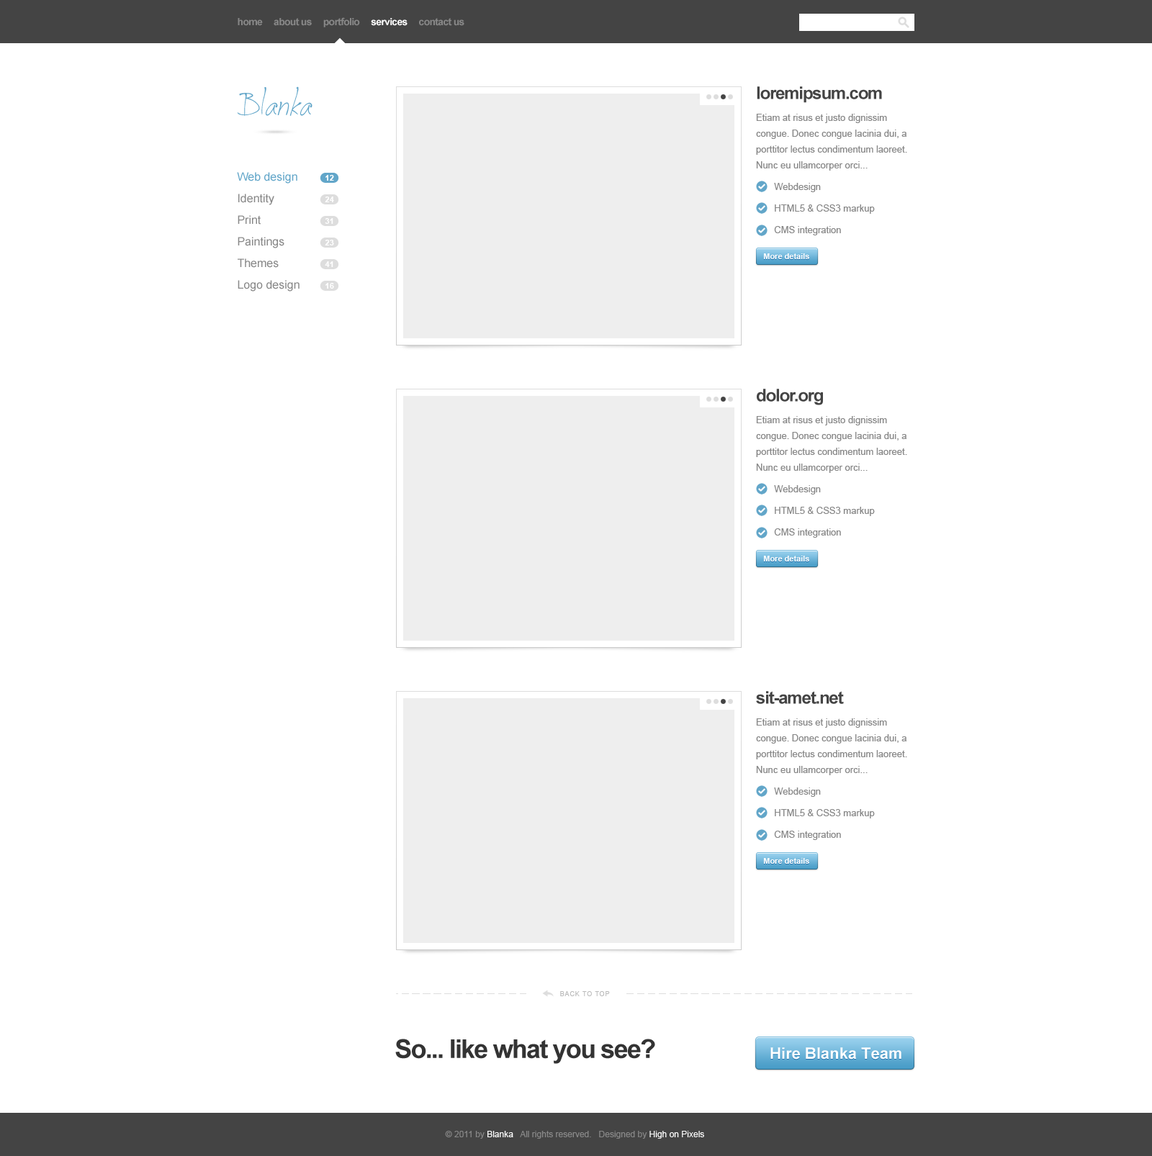
<style>
.page{position:relative;width:1152px;height:1156px;background:#ffffff}
.page>*{position:absolute;margin:0}
.t1{font:10.1px "Arial-BoldMT";letter-spacing:-0.05em;color:#888888}
.t2{font:10.1px "Arial-BoldMT";letter-spacing:-0.05em;color:#ffffff}
.t3{font:43.9px "JellykaCuttyCupcakes";color:#62a6c9}
.t4{font:17.3px "Arial-BoldMT";letter-spacing:-0.05em;color:#444444}
.t5{font:9.4px/15.8px "ArialMT";color:#888888}
.t6{font:9.4px/21.6px "ArialMT";color:#888888}
.t7{font:11.5px/21.6px "ArialMT";color:#888888}
.t8{font:11.5px/21.6px "ArialMT";color:#62a6c9}
.t9{font:7.9px "Arial-BoldMT";color:#ffffff}
.t10{font:6.5px "ArialMT";letter-spacing:0.1em;color:#bbbbbb;text-transform:uppercase}
.t11{font:25.9px "Arial-BoldMT";letter-spacing:-0.05em;color:#333333}
.t12{font:15.8px "Arial-BoldMT";color:#ffffff}
.t13{font:8.6px "ArialMT";color:#888888}
.t14{font:8.6px "ArialMT";color:#ffffff}
</style>
<div class="page">
<p class="t1" style="left:238px;top:17px;width:226px;height:10px">home     about us     portfolio     <span class="t2">services</span>     contact us</p>
<p class="t3" style="left:237px;top:86px;width:75px;height:31px">Blanka</p>
<p class="t4" style="left:757px;top:86px;width:125px;height:17px">loremipsum.com</p>
<p class="t5" style="left:756px;top:114px;width:151px;height:121px">Etiam at risus et justo dignissim congue. Donec congue lacinia dui, a porttitor lectus condimentum laoreet. Nunc eu ullamcorper orci...<br><span class="t6">       Webdesign<br>       HTML5 &amp; CSS3 markup<br>       CMS integration</span></p>
<p class="t7" style="left:237px;top:172px;width:63px;height:120px"><span class="t8">Web design<br></span>Identity<br>Print<br>Paintings<br>Themes<br>Logo design</p>
<p class="t9" style="left:325px;top:175px;width:9px;height:6px">12</p>
<p class="t9" style="left:325px;top:197px;width:9px;height:5px">24</p>
<p class="t9" style="left:325px;top:218px;width:8px;height:6px">31</p>
<p class="t9" style="left:325px;top:240px;width:9px;height:6px">23</p>
<p class="t9" style="left:763px;top:253px;width:46px;height:6px">More details</p>
<p class="t9" style="left:325px;top:261px;width:8px;height:6px">41</p>
<p class="t9" style="left:325px;top:283px;width:9px;height:6px">16</p>
<p class="t4" style="left:757px;top:389px;width:66px;height:16px">dolor.org</p>
<p class="t5" style="left:756px;top:416px;width:151px;height:122px">Etiam at risus et justo dignissim congue. Donec congue lacinia dui, a porttitor lectus condimentum laoreet. Nunc eu ullamcorper orci...<br><span class="t6">       Webdesign<br>       HTML5 &amp; CSS3 markup<br>       CMS integration</span></p>
<p class="t9" style="left:763px;top:556px;width:46px;height:6px">More details</p>
<p class="t4" style="left:756px;top:691px;width:88px;height:13px">sit-amet.net</p>
<p class="t5" style="left:756px;top:719px;width:151px;height:121px">Etiam at risus et justo dignissim congue. Donec congue lacinia dui, a porttitor lectus condimentum laoreet. Nunc eu ullamcorper orci...<br><span class="t6">       Webdesign<br>       HTML5 &amp; CSS3 markup<br>       CMS integration</span></p>
<p class="t9" style="left:763px;top:858px;width:46px;height:6px">More details</p>
<p class="t10" style="left:560px;top:991px;width:50px;height:5px">back to top</p>
<p class="t11" style="left:395px;top:1039px;width:260px;height:25px">So... like what you see?</p>
<p class="t12" style="left:770px;top:1048px;width:131px;height:12px">Hire Blanka Team</p>
<p class="t13" style="left:445px;top:1131px;width:259px;height:8px">© 2011 by <span class="t14">Blanka</span>   All rights reserved.   Designed by <span class="t14">High on Pixels</span></p>
</div>
